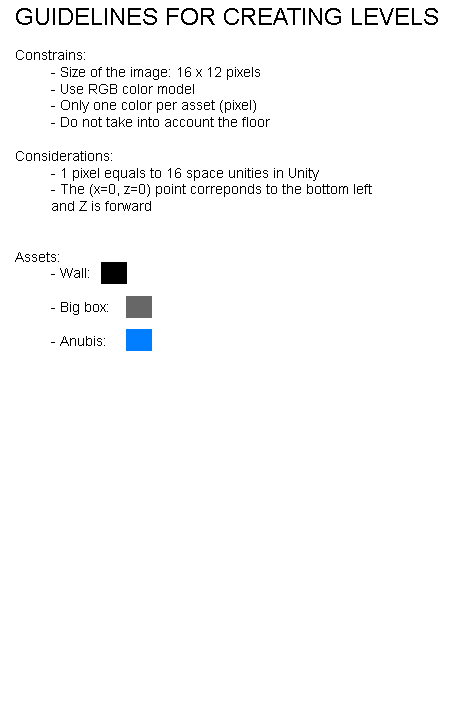
<style>
.page{position:relative;width:454px;height:706px;background:#ffffff}
.page>*{position:absolute;margin:0}
.t1{font:24px "ArialMT";color:#000000}
.t2{font:14px "ArialMT";color:#000000}
</style>
<div class="page">
<p class="t1" style="left:16px;top:8px;width:422px;height:17px">GUIDELINES FOR CREATING LEVELS</p>
<p class="t2" style="left:15px;top:50px;width:357px;height:296px">Constrains:<br> - Size of the image: 16 x 12 pixels<br> - Use RGB color model<br> - Only one color per asset (pixel)<br> - Do not take into account the floor<br><br>Considerations:<br> - 1 pixel equals to 16 space unities in Unity<br> - The (x=0, z=0) point correponds to the bottom left<br> and Z is forward<br><br><br>Assets:<br> - Wall: <br><br> - Big box: <br><br> - Anubis:</p>
</div>
